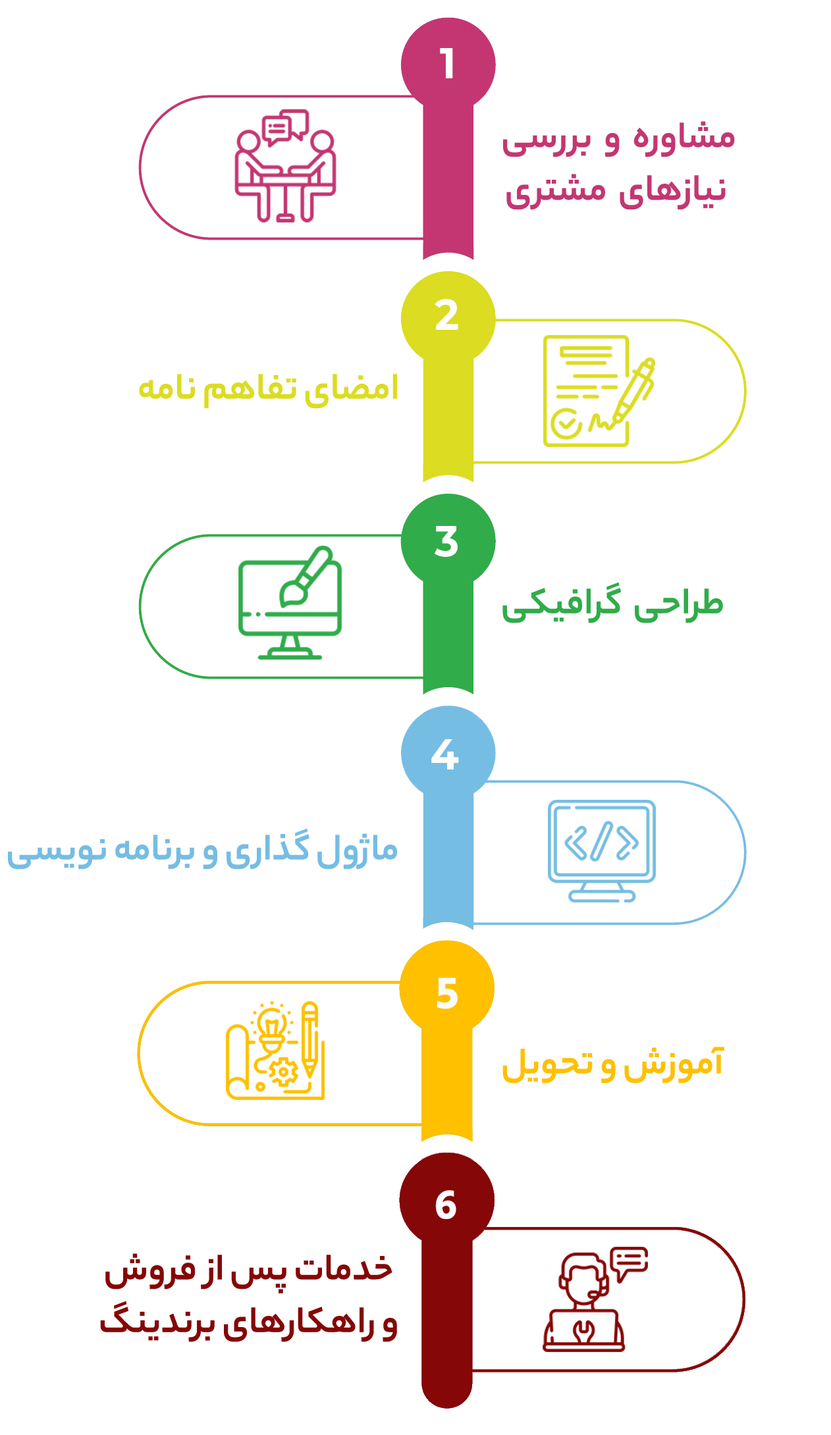
<style>
.page{position:relative;width:831px;height:1435px;background:#ffffff}
.page>*{position:absolute;margin:0}
.t1{font:39.5px/52.7px "YekanBakhFaNum-Bold";color:#c43672}
.t2{font:39.5px "YekanBakhFaNum-Bold";color:#dcdc22}
.t3{font:39.5px "YekanBakhFaNum-Bold";color:#30ac4a}
.t4{font:39.5px "YekanBakhFaNum-Bold";color:#75bde3}
.t5{font:39.5px "YekanBakhFaNum-Bold";color:#ffc000}
.t6{font:39.5px/52.7px "YekanBakhFaNum-Bold";color:#850707}
</style>
<div class="page">
<p class="t1" style="left:503px;top:121px;width:232px;height:89px;text-align:center">مشاوره  و  بررسی <br>نیازهای  مشتری</p>
<p class="t2" style="left:139px;top:374px;width:258px;height:35px">امضای تفاهم نامه</p>
<p class="t3" style="left:502px;top:582px;width:221px;height:41px">طراحی  گرافیکی</p>
<p class="t4" style="left:8px;top:828px;width:389px;height:42px">ماژول گذاری و برنامه نویسی</p>
<p class="t5" style="left:502px;top:1047px;width:222px;height:37px">آموزش و تحویل</p>
<p class="t6" style="left:100px;top:1254px;width:297px;height:88px;text-align:center">خدمات پس از فروش<br>و راهکارهای برندینگ</p>
</div>
